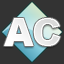
<style>
.page{position:relative;width:64px;height:64px;background:#333333}
.page>*{position:absolute;margin:0}
.t1{font:37.5px "Arial-Black";color:#fffefe}
</style>
<div class="page">
<p class="t1" style="left:4px;top:18px;width:57px;height:28px">AC</p>
</div>
